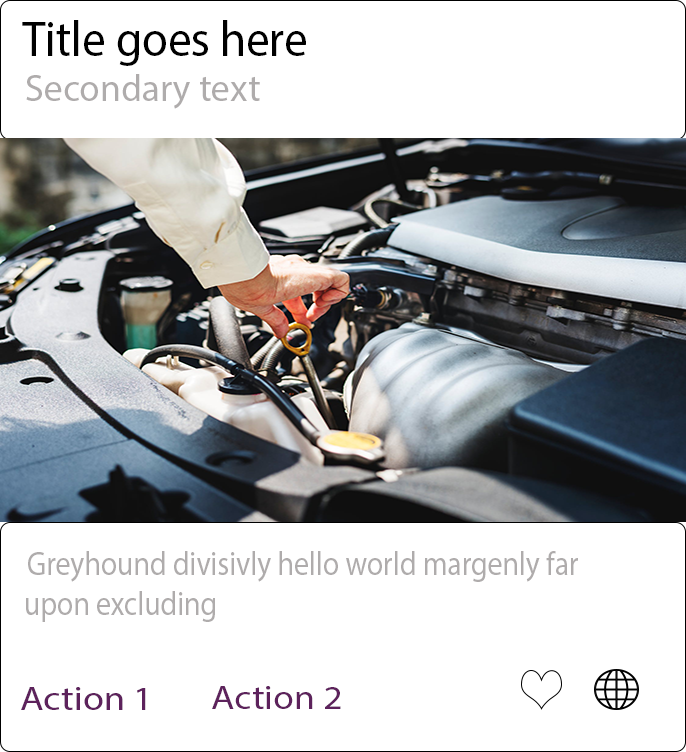
<style>
.page{position:relative;width:686px;height:752px;background:#ffffff}
.page>*{position:absolute;margin:0}
.t1{font:12px "MyriadPro-Regular";color:#000000;scale:0.94 1}
.t2{font:37.5px "MyriadPro-Regular";color:#afacac}
.t3{font:33.3px "MyriadPro-Regular";color:#afacac;scale:0.89 1}
.t4{font:33.3px "MyriadPro-Regular";color:#5d225c;scale:1.15 1}
.t5{font:33.3px "MyriadPro-Regular";color:#5d225c;scale:1.14 1}
</style>
<div class="page">
<p class="t1" style="left:22px;top:20px;width:284px;height:46px">Title goes here</p>
<p class="t2" style="left:26px;top:74px;width:234px;height:35px">Secondary text</p>
<p class="t3" style="left:26px;top:551px;width:552px;height:71px">Greyhound divisivly hello world margenly far upon excluding</p>
<p class="t4" style="left:21px;top:687px;width:125px;height:23px">Action 1</p>
<p class="t5" style="left:212px;top:686px;width:129px;height:23px">Action 2</p>
</div>
